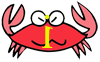
<style>
.page{position:relative;width:100px;height:62px;background:#ffffff}
.page>*{position:absolute;margin:0}
.t1{font:46.7px "TimesNewRomanPSMT";color:#e7f500}
</style>
<div class="page">
<p class="t1" style="left:42px;top:15px;width:11px;height:33px;rotate:180deg">i</p>
</div>
